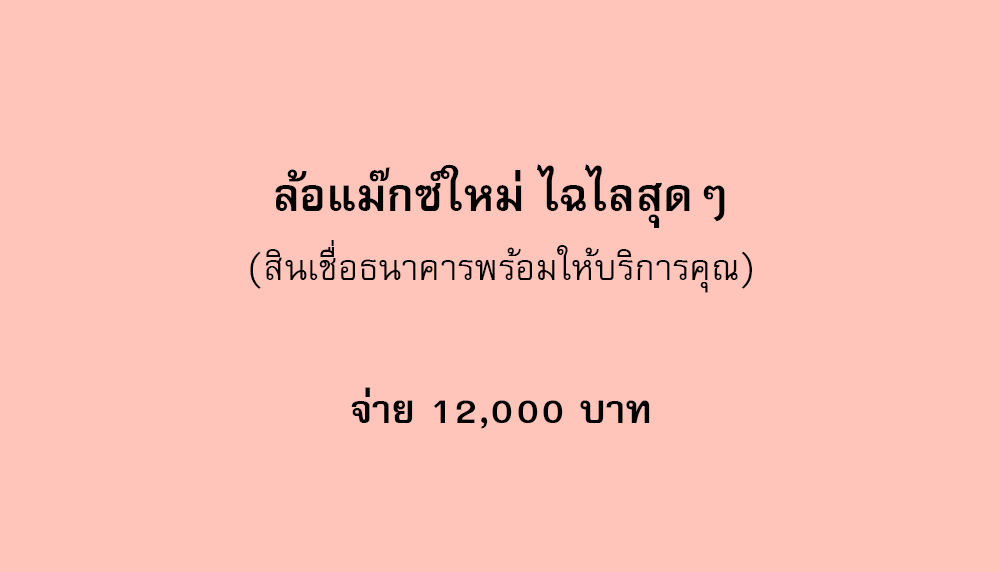
<style>
.page{position:relative;width:1000px;height:572px;background:#ffc4ba}
.page>*{position:absolute;margin:0}
.t1{font:64px "FreesiaUPCBold";color:#000000}
.t2{font:50px "FreesiaUPC";color:#000000}
.t3{font:56px "FreesiaUPCBold";color:#000000}
</style>
<div class="page">
<p class="t1" style="left:275px;top:164px;width:450px;height:64px">ล้อแม๊กซ์ใหม่ ไฉไลสุดๆ</p>
<p class="t2" style="left:250px;top:240px;width:502px;height:53px">(สินเชื่อธนาคารพร้อมให้บริการคุณ)</p>
<p class="t3" style="left:351px;top:387px;width:299px;height:42px">จ่าย 12,000 บาท</p>
</div>
